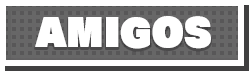
<style>
.page{position:relative;width:249px;height:71px;background:#ffffff}
.page>*{position:absolute;margin:0}
.t1{font:36px "RaglanPunchStd-UB";letter-spacing:0.004em;color:#ffffff}
</style>
<div class="page">
<p class="t1" style="left:35px;top:16px;width:176px;height:33px">AMIGOS</p>
</div>
